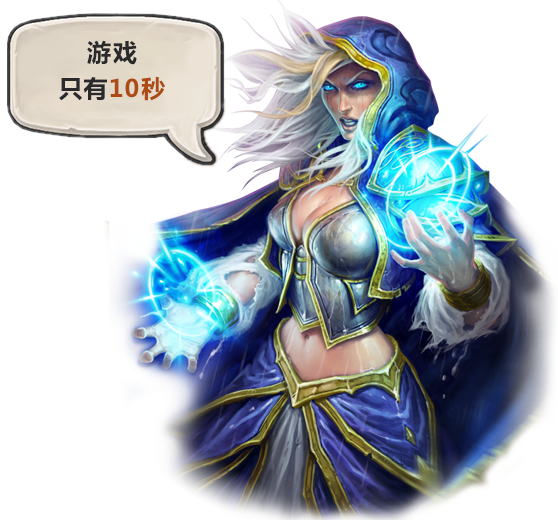
<style>
.page{position:relative;width:558px;height:523px;background:#ffffff}
.page>*{position:absolute;margin:0}
.t1{font:24px/36px "MicrosoftYaHei-Bold";letter-spacing:0.065em;color:#2a2a2c}
.t2{font:24px/36px "MicrosoftYaHei-Bold";letter-spacing:0.065em;color:#ad4b14}
</style>
<div class="page">
<p class="t1" style="left:59px;top:40px;width:106px;height:61px;text-align:center">游戏<br>只有<span class="t2">10秒</span></p>
</div>
